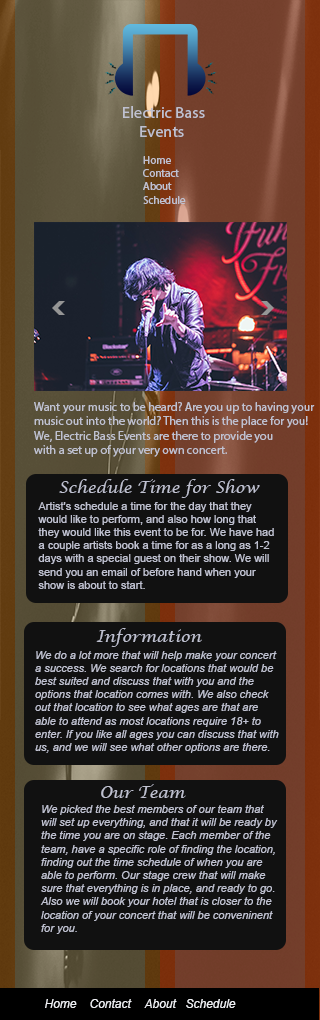
<style>
.page{position:relative;width:320px;height:1020px;background:#111111}
.page>*{position:absolute;margin:0}
.t1{font:16.4px "MyriadPro-Regular";color:#bfc1d0}
.t2{font:11px "MyriadPro-Regular";color:#bfc1d0}
.t3{font:12px "MyriadPro-Regular";color:#bfc1d0}
.t4{font:16px "LucidaCalligraphy-Italic";color:#bfc1d0}
.t5{font:11px "ArialMT";color:#bfc1d0}
.t6{font:11px "Arial-ItalicMT";color:#bfc1d0}
.t7{font:12px "Arial-ItalicMT";color:#eeeff3}
</style>
<div class="page">
<p class="t1" style="left:123px;top:106px;width:82px;height:31px">Electric Bass<br>     Events</p>
<p class="t2" style="left:143px;top:156px;width:43px;height:48px">Home<br>Contact<br>About<br>Schedule</p>
<p class="t3" style="left:34px;top:402px;width:281px;height:55px">Want your music to be heard? Are you up to having your<br>music out into the world? Then this is the place for you! <br>We, Electric Bass Events are there to provide you <br>with a set up of your very own concert.</p>
<p class="t4" style="left:59px;top:479px;width:201px;height:19px">Schedule Time for Show</p>
<p class="t5" style="left:38px;top:502px;width:236px;height:87px">Artist's schedule a time for the day that they <br>would like to perform, and also how long that <br>they would like this event to be for. We have had <br>a couple artists book a time for as a long as 1-2 <br>days with a special guest on their show. We will <br>send you an email of before hand when your <br>show is about to start.</p>
<p class="t4" style="left:96px;top:628px;width:106px;height:19px">Information</p>
<p class="t6" style="left:35px;top:651px;width:244px;height:102px">We do a lot more that will help make your concert<br>a success. We search for locations that would be <br>best suited and discuss that with you and the <br>options that location comes with. We also check <br>out that location to see what ages are that are <br>able to attend as most locations require 18+ to <br>enter. If you like all ages you can discuss that with <br>us, and we will see what other options are there.</p>
<p class="t4" style="left:101px;top:784px;width:85px;height:14px">Our Team</p>
<p class="t6" style="left:40px;top:805px;width:238px;height:129px">We picked the best members of our team that <br>will set up everything, and that it will be ready by <br>the time you are on stage. Each member of the <br>team, have a specific role of finding the location, <br>finding out the time schedule of when you are <br>able to perform. Our stage crew that will make <br>sure that everything is in place, and ready to go. <br>Also we will book your hotel that is closer to the <br>location of your concert that will be conveninent <br>for you.</p>
<p class="t7" style="left:45px;top:999px;width:32px;height:9px">Home</p>
<p class="t7" style="left:90px;top:999px;width:42px;height:9px">Contact</p>
<p class="t7" style="left:144px;top:999px;width:33px;height:9px">About</p>
<p class="t7" style="left:186px;top:999px;width:50px;height:9px">Schedule</p>
</div>
